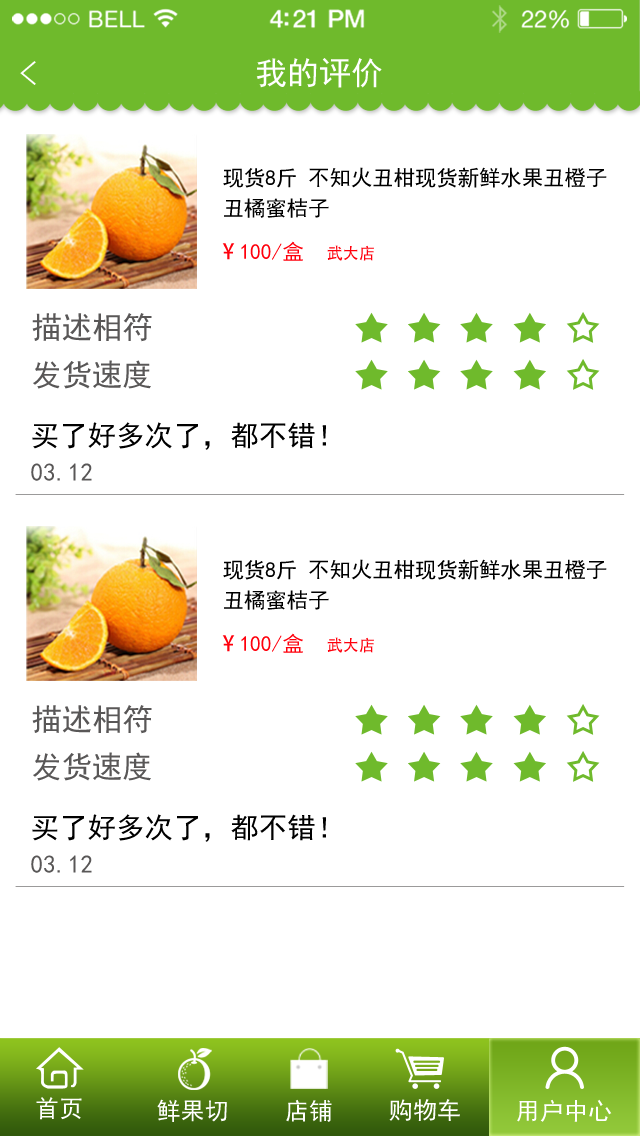
<style>
.page{position:relative;width:640px;height:1136px;background:#ffffff}
.page>*{position:absolute;margin:0}
.t1{font:33.9px "SimHei";color:#ffffff;scale:1.07 1}
.t2{font:32.1px "SimHei";color:#ffffff}
.t3{font:21.4px/30.3px "SimHei";color:#000000}
.t4{font:21.4px "SimHei";color:#ff000c}
.t5{font:21.4px "AdobeHeitiStd-Regular";color:#ff000c}
.t6{font:16px "AdobeHeitiStd-Regular";color:#ff000c}
.t7{font:30.3px "SimHei";color:#595757}
.t8{font:28.5px "SimHei";color:#000000}
.t9{font:24.9px "SimHei";color:#595757}
.t10{font:24.1px "SimHei";color:#ffffff}
</style>
<div class="page">
<p class="t1" style="left:20px;top:61px;width:16px;height:24px;rotate:180deg">&gt;</p>
<p class="t2" style="left:256px;top:58px;width:126px;height:30px">我的评价</p>
<p class="t3" style="left:223px;top:167px;width:384px;height:51px">现货8斤 不知火丑柑现货新鲜水果丑橙子 <br>丑橘蜜桔子</p>
<p class="t4" style="left:222px;top:241px;width:81px;height:20px"><span class="t5">¥ </span>100/盒</p>
<p class="t6" style="left:327px;top:245px;width:47px;height:16px">武大店</p>
<p class="t7" style="left:32px;top:313px;width:120px;height:29px">描述相符</p>
<p class="t7" style="left:33px;top:360px;width:118px;height:29px">发货速度</p>
<p class="t8" style="left:32px;top:422px;width:294px;height:28px">买了好多次了，都不错！</p>
<p class="t9" style="left:31px;top:463px;width:61px;height:18px">03.12</p>
<p class="t3" style="left:223px;top:559px;width:384px;height:51px">现货8斤 不知火丑柑现货新鲜水果丑橙子 <br>丑橘蜜桔子</p>
<p class="t4" style="left:222px;top:633px;width:81px;height:20px"><span class="t5">¥ </span>100/盒</p>
<p class="t6" style="left:327px;top:637px;width:47px;height:16px">武大店</p>
<p class="t7" style="left:32px;top:705px;width:120px;height:29px">描述相符</p>
<p class="t7" style="left:33px;top:752px;width:118px;height:29px">发货速度</p>
<p class="t8" style="left:32px;top:814px;width:294px;height:28px">买了好多次了，都不错！</p>
<p class="t9" style="left:31px;top:855px;width:61px;height:18px">03.12</p>
<p class="t10" style="left:36px;top:1097px;width:46px;height:23px">首页</p>
<p class="t10" style="left:157px;top:1099px;width:70px;height:23px">鲜果切</p>
<p class="t10" style="left:286px;top:1099px;width:46px;height:23px">店铺</p>
<p class="t10" style="left:389px;top:1099px;width:71px;height:22px">购物车</p>
<p class="t10" style="left:517px;top:1099px;width:95px;height:23px">用户中心</p>
</div>
